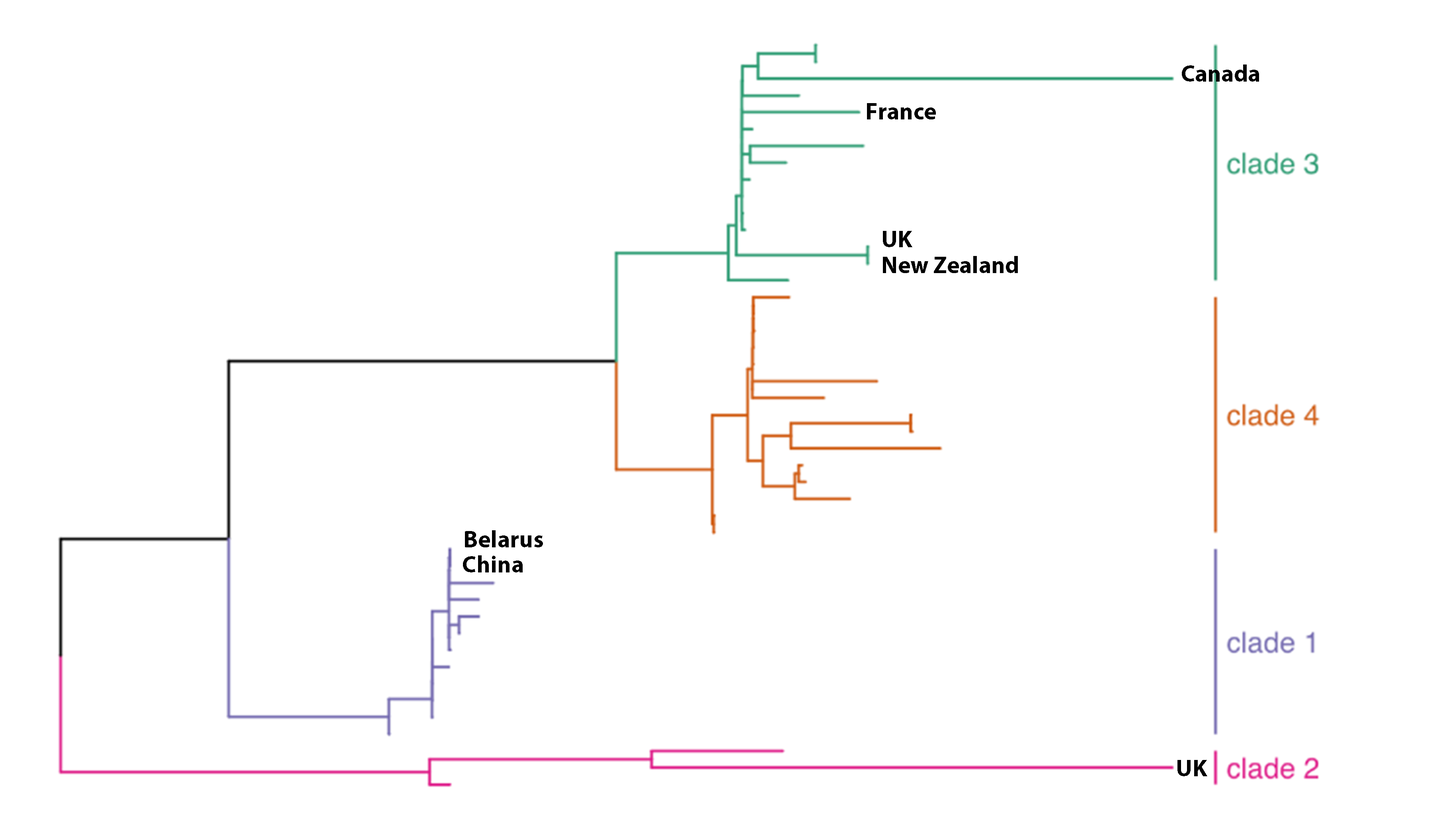
<style>
.page{position:relative;width:1433px;height:832px;background:#ffffff}
.page>*{position:absolute;margin:0}
.t1{font:23.9px "MyriadPro-Bold";color:#000000}
</style>
<div class="page">
<p class="t1" style="left:1182px;top:64px;width:77px;height:18px">Canada</p>
<p class="t1" style="left:867px;top:103px;width:69px;height:16px">France</p>
<p class="t1" style="left:883px;top:231px;width:29px;height:16px">UK</p>
<p class="t1" style="left:883px;top:256px;width:135px;height:17px">New Zealand</p>
<p class="t1" style="left:465px;top:530px;width:78px;height:17px">Belarus</p>
<p class="t1" style="left:463px;top:555px;width:60px;height:17px">China</p>
<p class="t1" style="left:1178px;top:760px;width:29px;height:16px">UK</p>
</div>
